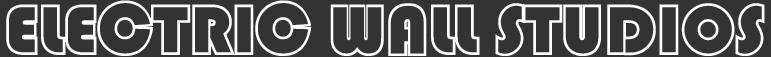
<style>
.page{position:relative;width:771px;height:57px;background:#333333}
.page>*{position:absolute;margin:0}
.t1{font:72px "STCaiyun";color:#ffffff}
</style>
<div class="page">
<p class="t1" style="left:6px;top:0px;width:759px;height:56px">ELECTRIC WALL STUDIOS</p>
</div>
